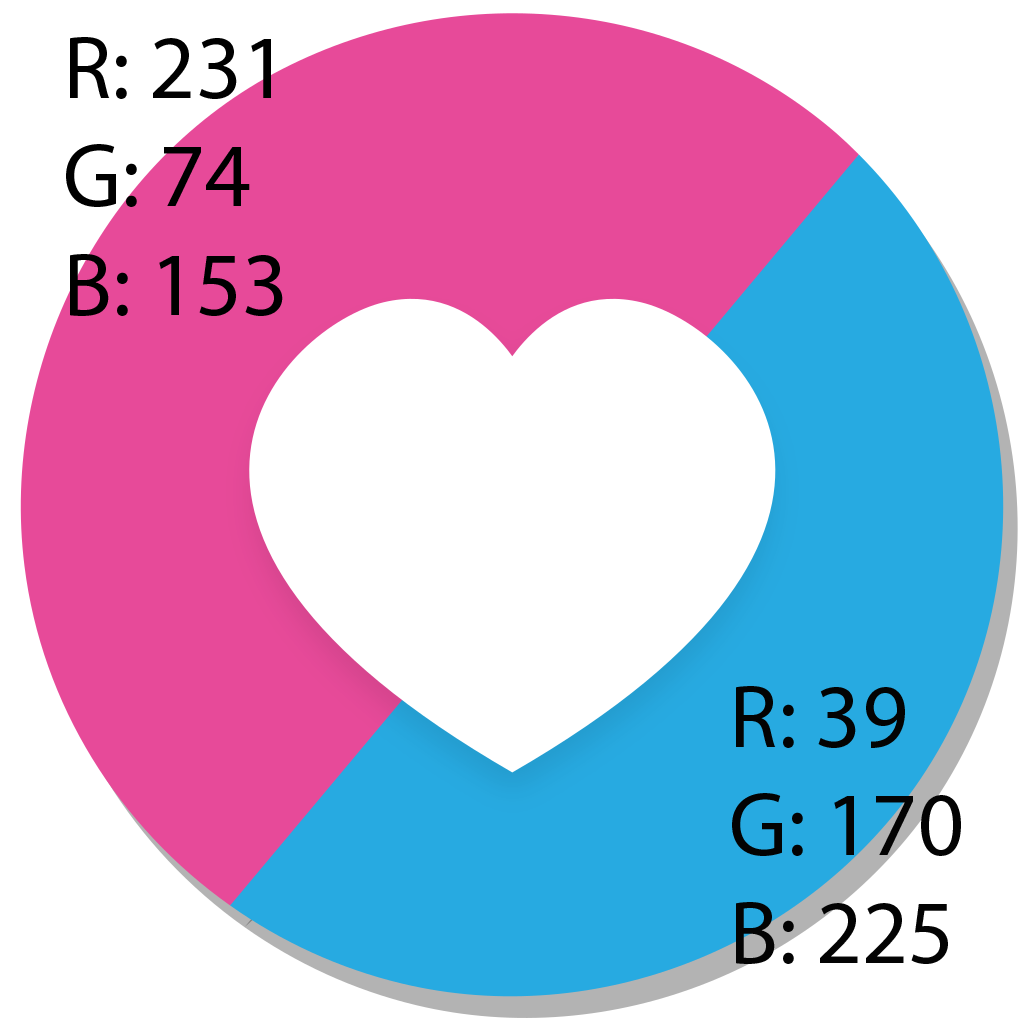
<style>
.page{position:relative;width:1024px;height:1024px;background:#ffffff}
.page>*{position:absolute;margin:0}
.t1{font:90.3px "MyriadPro-Regular";color:#000000}
.t2{font:90.3px "MyriadPro-Regular";color:#030303}
</style>
<div class="page">
<p class="t1" style="left:66px;top:37px;width:217px;height:279px">R: 231<br>G: 74<br>B: 153</p>
<p class="t2" style="left:732px;top:686px;width:229px;height:278px">R: 39<br>G: 170<br>B: 225</p>
</div>
